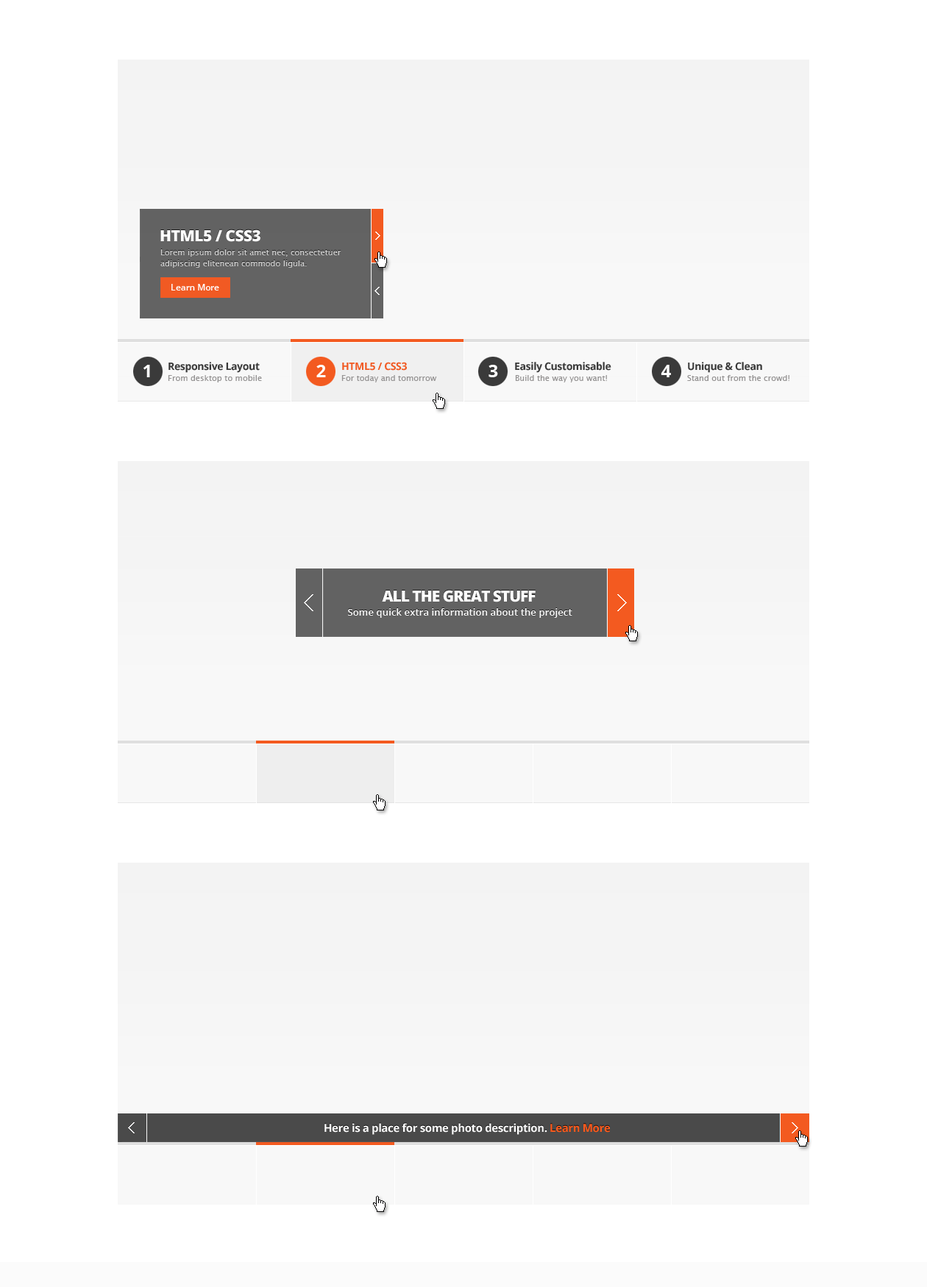
<style>
.page{position:relative;width:927px;height:1287px;background:#ffffff}
.page>*{position:absolute;margin:0}
.t1{font:15.4px "OpenSans-Extrabold";letter-spacing:-0.025em;color:#ffffff;text-transform:uppercase}
.t2{font:8.1px/11px "LucidaSans";color:#d0d0d0}
.t3{font:8.8px "OpenSans-Semibold";letter-spacing:-0.01em;color:#ffffff}
.t4{font:17.6px "OpenSans-Bold";letter-spacing:-0.05em;color:#ffffff}
.t5{font:10.3px "OpenSans-Bold";letter-spacing:-0.025em;color:#3a3a3a}
.t6{font:10.3px "OpenSans-Bold";letter-spacing:-0.025em;color:#f15a23}
.t7{font:8.1px "LucidaSans";color:#959393}
.t8{font:15.4px "OpenSans-Extrabold";letter-spacing:-0.05em;color:#ffffff;text-transform:uppercase}
.t9{font:9.6px "OpenSans-Semibold";letter-spacing:0.01em;color:#ffffff}
.t10{font:11px "OpenSans-Bold";letter-spacing:-0.025em;color:#ffffff}
.t11{font:11px "OpenSans-Bold";letter-spacing:-0.025em;color:#ff5a1c}
</style>
<div class="page">
<p class="t1" style="left:160px;top:229px;width:100px;height:13px">HTML5 / CSS3</p>
<p class="t2" style="left:160px;top:249px;width:181px;height:19px">Lorem ipsum dolor sit amet nec, consectetuer <br>adipiscing elitenean commodo ligula.</p>
<p class="t3" style="left:171px;top:284px;width:48px;height:6px">Learn More</p>
<p class="t4" style="left:143px;top:365px;width:7px;height:12px">1</p>
<p class="t5" style="left:168px;top:362px;width:92px;height:11px">Responsive Layout</p>
<p class="t4" style="left:316px;top:365px;width:10px;height:12px">2</p>
<p class="t6" style="left:342px;top:362px;width:65px;height:9px">HTML5 / CSS3</p>
<p class="t4" style="left:488px;top:365px;width:10px;height:12px">3</p>
<p class="t5" style="left:515px;top:362px;width:96px;height:11px">Easily Customisable</p>
<p class="t4" style="left:660px;top:365px;width:11px;height:12px">4</p>
<p class="t5" style="left:688px;top:362px;width:74px;height:11px">Unique &amp; Clean</p>
<p class="t7" style="left:168px;top:375px;width:94px;height:7px">From desktop to mobile</p>
<p class="t7" style="left:341px;top:375px;width:96px;height:7px">For today and tomorrow</p>
<p class="t7" style="left:515px;top:375px;width:92px;height:7px">Build the way you want!</p>
<p class="t7" style="left:687px;top:375px;width:102px;height:6px">Stand out from the crowd!</p>
<p class="t8" style="left:382px;top:590px;width:153px;height:12px">All The Great Stuff</p>
<p class="t9" style="left:348px;top:608px;width:224px;height:10px">Some quick extra information about the project</p>
<p class="t10" style="left:324px;top:1123px;width:286px;height:12px">Here is a place for some photo description. <span class="t11">Learn More</span></p>
</div>
